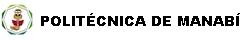
<style>
.page{position:relative;width:250px;height:40px;background:#ffffff}
.page>*{position:absolute;margin:0}
.t1{font:14px "Arial-Black";color:#000000}
</style>
<div class="page">
<p class="t1" style="left:41px;top:13px;width:199px;height:13px">POLITÉCNICA DE MANABÍ</p>
</div>
